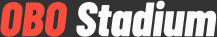
<style>
.page{position:relative;width:217px;height:37px;background:#333333}
.page>*{position:absolute;margin:0}
.t1{font:48px "BarlowCondensed-ExtraBoldItalic";color:#fafafa}
.t2{font:48px "BarlowCondensed-ExtraBoldItalic";color:#fb4d3d}
</style>
<div class="page">
<p class="t1" style="left:0px;top:0px;width:217px;height:37px"><span class="t2">OBO </span>Stadium</p>
</div>
